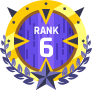
<style>
.page{position:relative;width:92px;height:90px;background:#ffffff}
.page>*{position:absolute;margin:0}
.t1{font:11px "Rajdhani-Bold";color:#ffffff}
.t2{font:30px "Rajdhani-Bold";color:#ffffff}
</style>
<div class="page">
<p class="t1" style="left:34px;top:26px;width:25px;height:8px">RANK</p>
<p class="t2" style="left:40px;top:37px;width:13px;height:20px">6</p>
</div>
